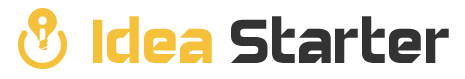
<style>
.page{position:relative;width:465px;height:79px;background:#ffffff}
.page>*{position:absolute;margin:0}
.t1{font:72px "GayatriRegular";color:#333333}
.t2{font:72px "GayatriRegular";color:#f5c13b}
</style>
<div class="page">
<p class="t1" style="left:93px;top:16px;width:356px;height:47px"><span class="t2">Idea </span>Starter</p>
</div>
